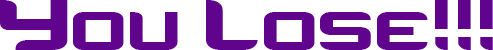
<style>
.page{position:relative;width:493px;height:50px;background:#ffffff}
.page>*{position:absolute;margin:0}
.t1{font:100px "Counter-StrikeRegular";color:#61048d}
</style>
<div class="page">
<p class="t1" style="left:0px;top:0px;width:493px;height:50px">You Lose!!!</p>
</div>
